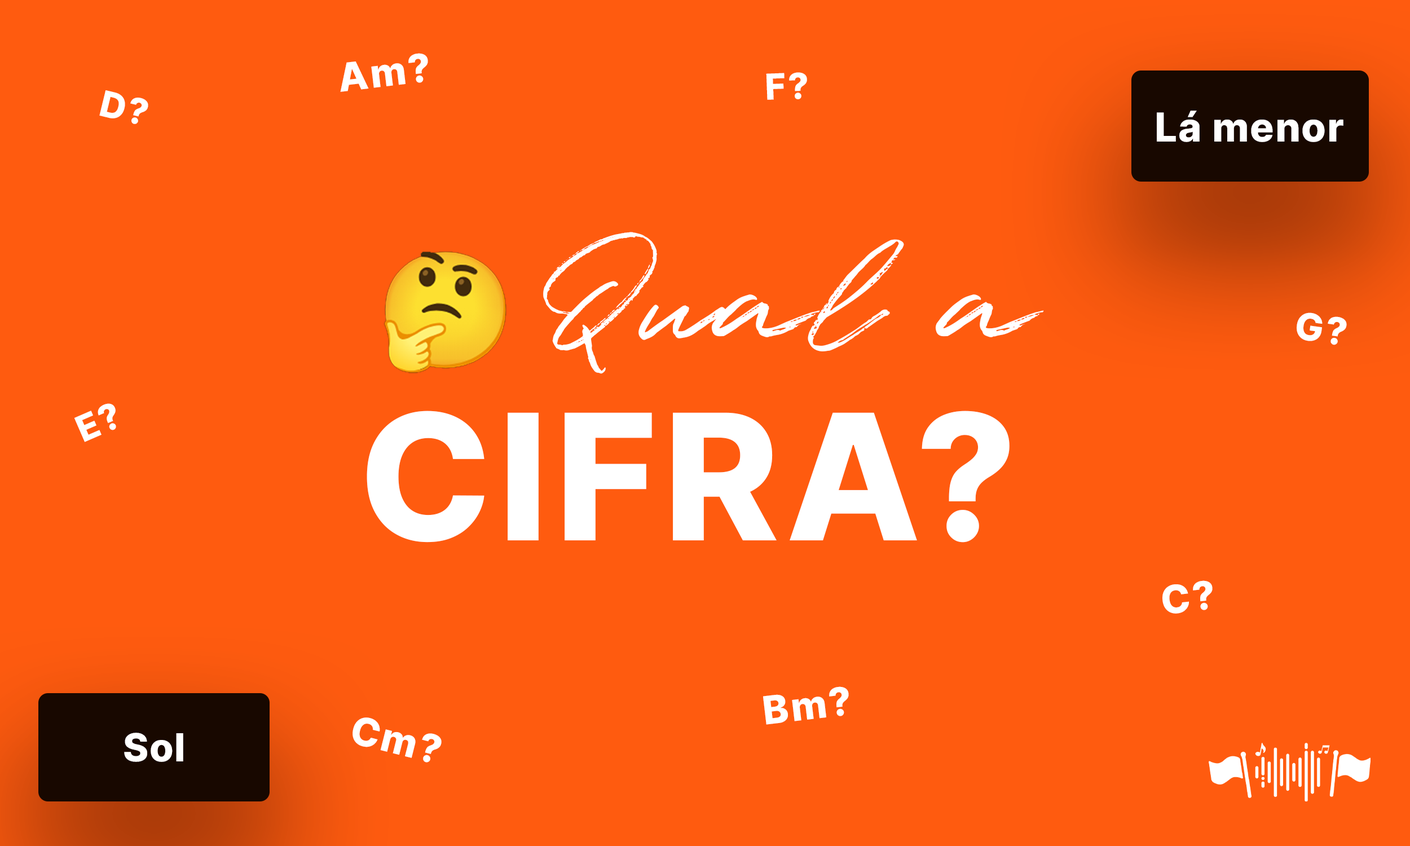
<style>
.page{position:relative;width:1410px;height:846px;background:#ff5b0f}
.page>*{position:absolute;margin:0}
.t1{font:39px "Inter-ExtraBold";letter-spacing:0.05em;color:#ffffff;text-transform:uppercase}
.t2{font:39px "Inter-ExtraBold";letter-spacing:0.05em;color:#ffffff}
.t3{font:39px "Inter-ExtraBold";letter-spacing:0.4em;color:#ffffff;text-transform:uppercase}
.t4{font:35.9px "Inter-ExtraBold";letter-spacing:0.05em;color:#ffffff;text-transform:uppercase}
.t5{font:35.9px "Inter-ExtraBold";letter-spacing:0.4em;color:#ffffff;text-transform:uppercase}
.t6{font:39.8px "Inter-ExtraBold";letter-spacing:0.025em;color:#ffffff}
.t7{font:156.5px "Quentin";letter-spacing:0.025em;color:#ffffff}
.t8{font:37.5px "Inter-ExtraBold";letter-spacing:0.05em;color:#ffffff;text-transform:uppercase}
.t9{font:37.5px "Inter-ExtraBold";letter-spacing:0.4em;color:#ffffff;text-transform:uppercase}
.t10{font:175.1px "Inter-ExtraBold";letter-spacing:0.025em;color:#ffffff;text-transform:uppercase}
.t11{font:38.7px "Inter-ExtraBold";letter-spacing:0.025em;color:#ffffff}
</style>
<div class="page">
<p class="t1" style="left:340px;top:53px;width:88px;height:39px;rotate:-7deg">A<span class="t2">m</span><span class="t3">?</span></p>
<p class="t4" style="left:766px;top:72px;width:41px;height:28px;rotate:-2deg">f<span class="t5">?</span></p>
<p class="t4" style="left:99px;top:90px;width:49px;height:34px;rotate:14deg">D<span class="t5">?</span></p>
<p class="t6" style="left:1157px;top:111px;width:186px;height:31px">Lá menor</p>
<p class="t7" style="left:543px;top:232px;width:501px;height:142px">Qual a</p>
<p class="t8" style="left:1296px;top:312px;width:51px;height:33px;rotate:8deg">G<span class="t9">?</span></p>
<p class="t4" style="left:74px;top:403px;width:42px;height:39px;rotate:-23deg">E<span class="t5">?</span></p>
<p class="t10" style="left:367px;top:411px;width:642px;height:131px">cifra?</p>
<p class="t1" style="left:1162px;top:580px;width:50px;height:34px;rotate:-7deg">c<span class="t3">?</span></p>
<p class="t1" style="left:763px;top:686px;width:86px;height:39px;rotate:-7deg">B<span class="t2">m</span><span class="t3">?</span></p>
<p class="t1" style="left:352px;top:717px;width:90px;height:45px;rotate:14deg">C<span class="t2">m</span><span class="t3">?</span></p>
<p class="t11" style="left:124px;top:733px;width:59px;height:29px">Sol</p>
</div>
